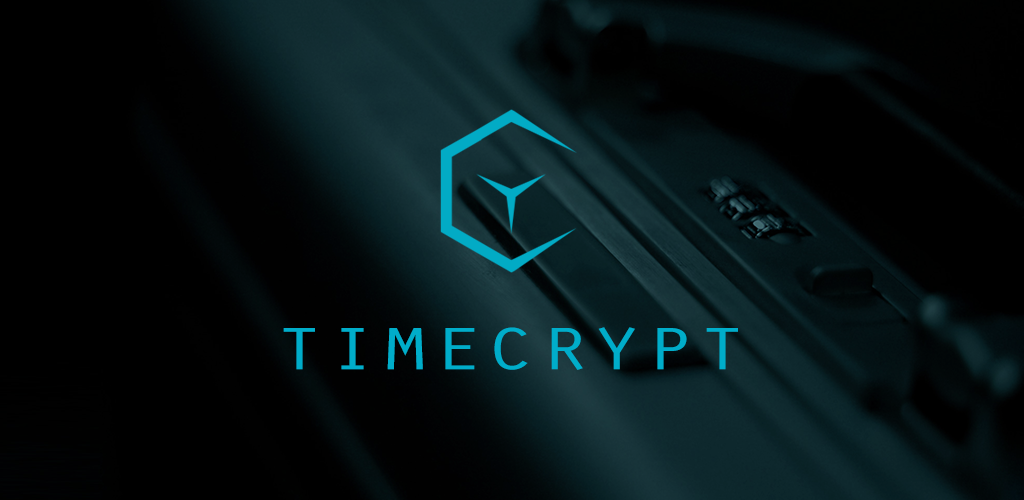
<style>
.page{position:relative;width:1024px;height:500px;background:#000000}
.page>*{position:absolute;margin:0}
.t1{font:61.7px "OratorStd";color:#00adca;scale:1.43 1}
</style>
<div class="page">
<p class="t1" style="left:283px;top:327px;width:455px;height:43px">TIMECRYPT</p>
</div>
